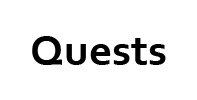
<style>
.page{position:relative;width:197px;height:100px;background:#ffffff}
.page>*{position:absolute;margin:0}
.t1{font:45.1px "Corbel-Bold";color:#000000}
</style>
<div class="page">
<p class="t1" style="left:32px;top:36px;width:134px;height:29px">Quests</p>
</div>
